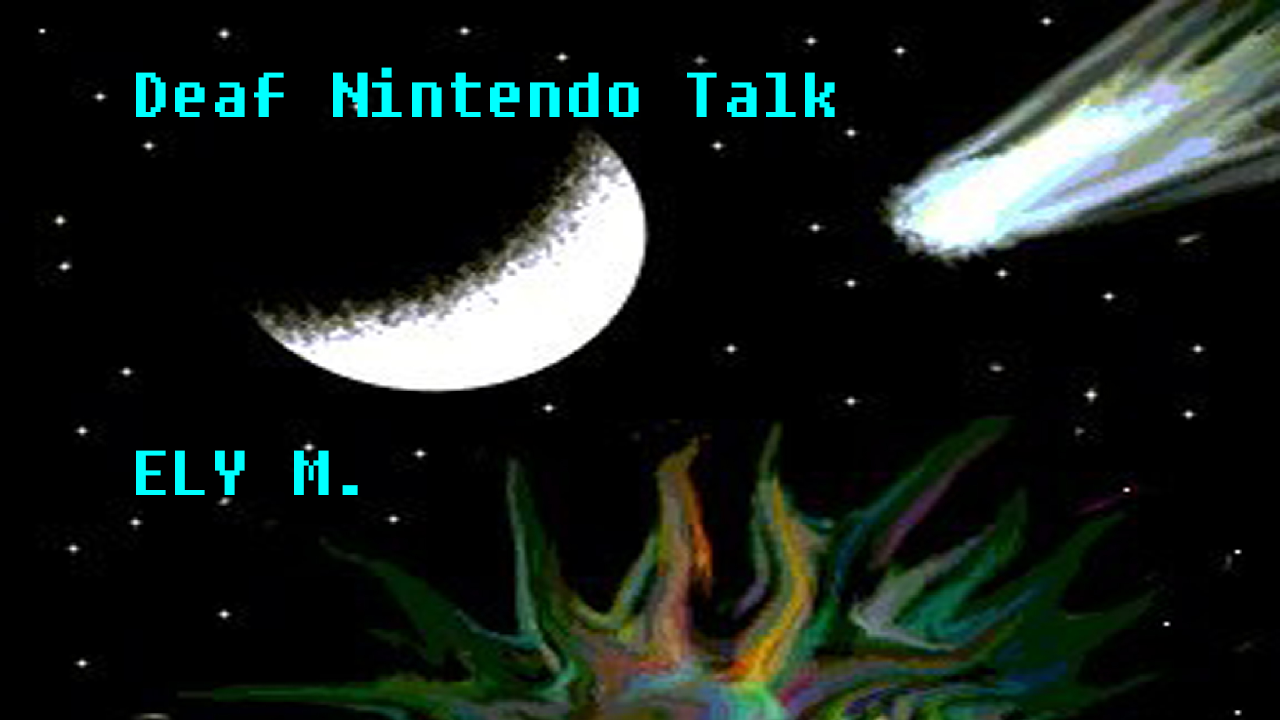
<style>
.page{position:relative;width:1280px;height:720px;background:#000000}
.page>*{position:absolute;margin:0}
.t1{font:63px "Fixedsys";color:#00ffff}
</style>
<div class="page">
<p class="t1" style="left:136px;top:67px;width:699px;height:428px">Deaf Nintendo Talk<br> <br><br><br><br>ELY M.</p>
</div>
